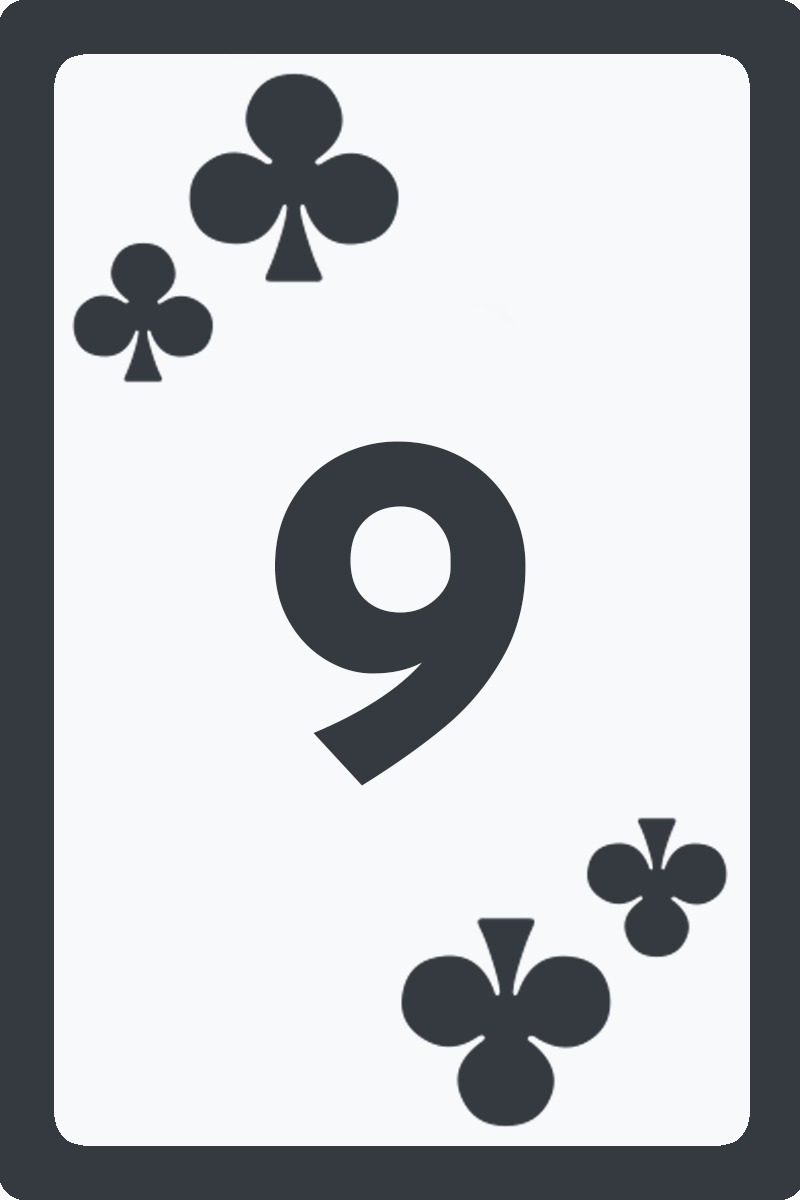
<style>
.page{position:relative;width:800px;height:1200px;background:#f8f9fa}
.page>*{position:absolute;margin:0}
.t1{font:500px "JosefinSans-Bold";color:#343a40}
</style>
<div class="page">
<p class="t1" style="left:275px;top:441px;width:251px;height:345px">9</p>
</div>
